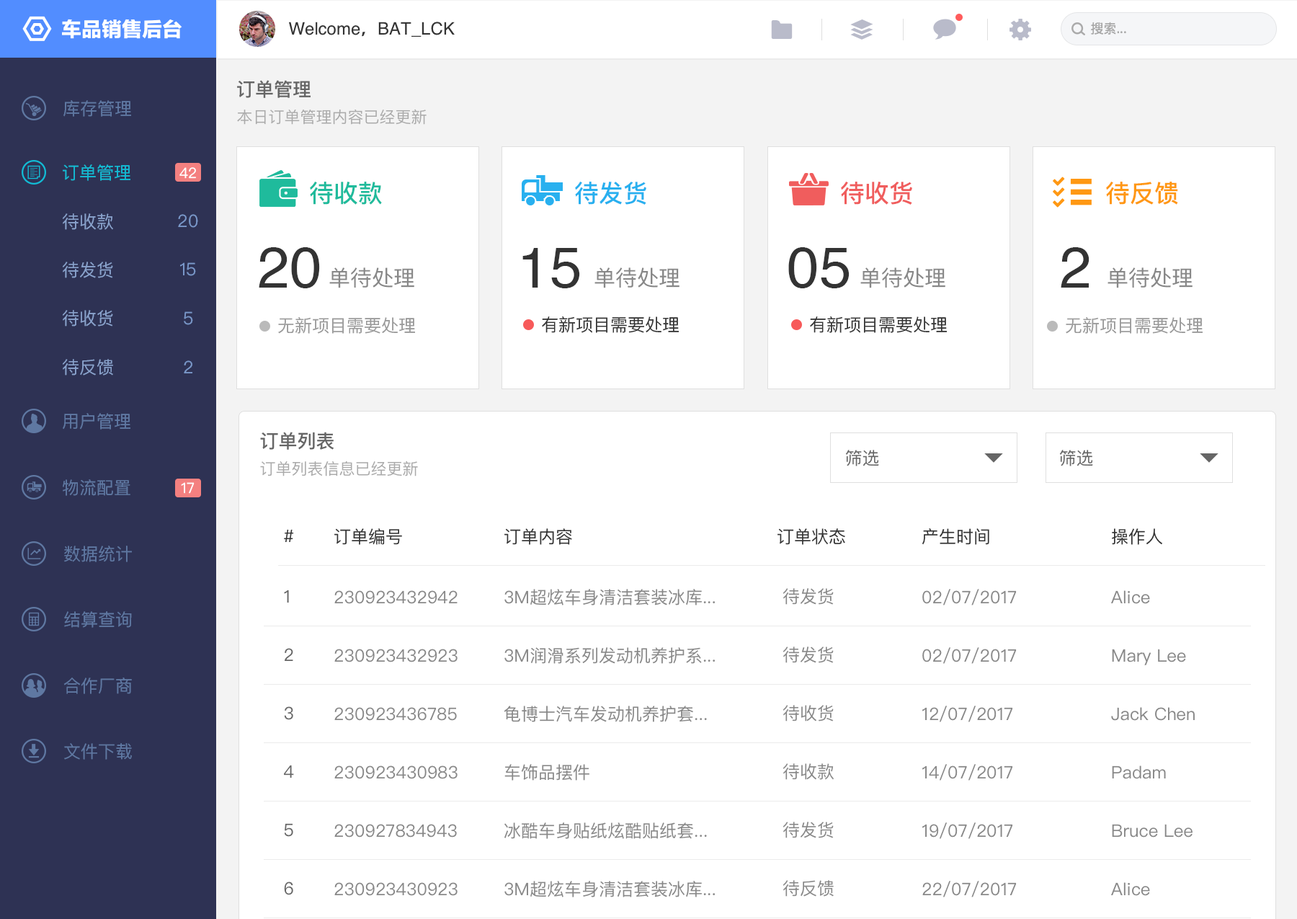
<style>
.page{position:relative;width:1297px;height:919px;background:#ffffff}
.page>*{position:absolute;margin:0}
.t1{font:20.2px "FZLTTHK--GBK1-0";color:#ffffff}
.t2{font:17.3px "Helvetica";color:#333333}
.t3{font:17.3px "AdobeHeitiStd-Regular";color:#333333}
.t4{font:13px "PingFangSC-Regular";color:#aaaaaa}
.t5{font:18.7px "PingFangSC-Medium";color:#666666}
.t6{font:17.3px "PingFangSC-Regular";color:#5f78a2}
.t7{font:15.9px "PingFangSC-Regular";color:#aaaaaa}
.t8{font:17.3px "PingFangSC-Regular";color:#12bcd5}
.t9{font:14.4px "PingFangSC-Regular";color:#ffffff}
.t10{font:24.5px "PingFangSC-Medium";color:#1fbb9c}
.t11{font:24.5px "PingFangSC-Medium";color:#29b0ef}
.t12{font:24.5px "PingFangSC-Medium";color:#f05d5d}
.t13{font:24.5px "PingFangSC-Medium";color:#fe9712}
.t14{font:17.3px "PingFangSC-Regular";color:#8aa3cd}
.t15{font:17.3px "PingFangSC-Regular";color:#7997c9}
.t16{font:57.7px "Helvetica";color:#333333}
.t17{font:21.6px "PingFangSC-Regular";color:#888888}
.t18{font:17.3px "PingFangSC-Regular";color:#999999}
.t19{font:17.3px "PingFangSC-Regular";color:#333333}
.t20{font:17.3px "PingFangSC-Regular";color:#666666}
.t21{font:17.3px "PingFangSC-Regular";color:#888888}
</style>
<div class="page">
<p class="t1" style="left:62px;top:19px;width:120px;height:20px">车品销售后台</p>
<p class="t2" style="left:289px;top:22px;width:166px;height:15px">Welcome<span class="t3">，</span>BAT_LCK</p>
<p class="t4" style="left:1091px;top:22px;width:36px;height:13px">搜索...</p>
<p class="t5" style="left:237px;top:80px;width:74px;height:18px">订单管理</p>
<p class="t6" style="left:63px;top:100px;width:68px;height:17px">库存管理</p>
<p class="t7" style="left:237px;top:109px;width:190px;height:16px">本日订单管理内容已经更新</p>
<p class="t8" style="left:63px;top:164px;width:67px;height:17px">订单管理</p>
<p class="t9" style="left:179px;top:167px;width:17px;height:12px">42</p>
<p class="t10" style="left:310px;top:182px;width:72px;height:23px">待收款</p>
<p class="t11" style="left:575px;top:182px;width:72px;height:23px">待发货</p>
<p class="t12" style="left:841px;top:182px;width:72px;height:23px">待收货</p>
<p class="t13" style="left:1106px;top:182px;width:73px;height:23px">待反馈</p>
<p class="t14" style="left:63px;top:213px;width:50px;height:17px">待收款</p>
<p class="t15" style="left:178px;top:214px;width:20px;height:14px">20</p>
<p class="t16" style="left:259px;top:247px;width:61px;height:41px">20</p>
<p class="t16" style="left:523px;top:248px;width:57px;height:40px">15</p>
<p class="t16" style="left:789px;top:247px;width:61px;height:41px">05</p>
<p class="t16" style="left:1061px;top:247px;width:29px;height:41px">2</p>
<p class="t14" style="left:63px;top:262px;width:50px;height:16px">待发货</p>
<p class="t15" style="left:180px;top:262px;width:16px;height:14px">15</p>
<p class="t17" style="left:329px;top:267px;width:85px;height:21px">单待处理</p>
<p class="t17" style="left:595px;top:267px;width:85px;height:21px">单待处理</p>
<p class="t17" style="left:861px;top:267px;width:85px;height:21px">单待处理</p>
<p class="t17" style="left:1108px;top:267px;width:85px;height:21px">单待处理</p>
<p class="t14" style="left:63px;top:310px;width:50px;height:17px">待收货</p>
<p class="t15" style="left:184px;top:311px;width:9px;height:14px">5</p>
<p class="t18" style="left:278px;top:317px;width:137px;height:17px">无新项目需要处理</p>
<p class="t19" style="left:542px;top:316px;width:137px;height:17px">有新项目需要处理</p>
<p class="t19" style="left:810px;top:316px;width:137px;height:17px">有新项目需要处理</p>
<p class="t18" style="left:1066px;top:317px;width:137px;height:17px">无新项目需要处理</p>
<p class="t14" style="left:63px;top:359px;width:50px;height:17px">待反馈</p>
<p class="t15" style="left:184px;top:360px;width:8px;height:13px">2</p>
<p class="t6" style="left:63px;top:413px;width:67px;height:17px">用户管理</p>
<p class="t5" style="left:260px;top:432px;width:74px;height:18px">订单列表</p>
<p class="t20" style="left:846px;top:450px;width:33px;height:16px">筛选</p>
<p class="t20" style="left:1060px;top:450px;width:33px;height:16px">筛选</p>
<p class="t7" style="left:260px;top:461px;width:158px;height:15px">订单列表信息已经更新</p>
<p class="t6" style="left:63px;top:479px;width:67px;height:17px">物流配置</p>
<p class="t9" style="left:181px;top:482px;width:14px;height:12px">17</p>
<p class="t19" style="left:284px;top:529px;width:10px;height:13px">#</p>
<p class="t19" style="left:334px;top:528px;width:68px;height:17px">订单编号</p>
<p class="t19" style="left:505px;top:528px;width:67px;height:17px">订单内容</p>
<p class="t19" style="left:778px;top:528px;width:68px;height:17px">订单状态</p>
<p class="t19" style="left:923px;top:528px;width:67px;height:17px">产生时间</p>
<p class="t19" style="left:1112px;top:528px;width:51px;height:17px">操作人</p>
<p class="t6" style="left:64px;top:546px;width:68px;height:16px">数据统计</p>
<p class="t20" style="left:284px;top:590px;width:5px;height:13px">1</p>
<p class="t21" style="left:334px;top:590px;width:124px;height:14px">230923432942</p>
<p class="t21" style="left:505px;top:589px;width:211px;height:16px">3M超炫车身清洁套装冰库...</p>
<p class="t21" style="left:784px;top:588px;width:50px;height:17px">待发货</p>
<p class="t21" style="left:923px;top:589px;width:94px;height:16px">02/07/2017</p>
<p class="t21" style="left:1112px;top:590px;width:38px;height:14px">Alice</p>
<p class="t6" style="left:64px;top:611px;width:68px;height:17px">结算查询</p>
<p class="t20" style="left:285px;top:648px;width:8px;height:13px">2</p>
<p class="t21" style="left:334px;top:649px;width:124px;height:13px">230923432923</p>
<p class="t21" style="left:505px;top:647px;width:211px;height:17px">3M润滑系列发动机养护系...</p>
<p class="t21" style="left:784px;top:647px;width:50px;height:16px">待发货</p>
<p class="t21" style="left:923px;top:647px;width:94px;height:17px">02/07/2017</p>
<p class="t21" style="left:1112px;top:649px;width:74px;height:16px">Mary Lee</p>
<p class="t6" style="left:63px;top:678px;width:69px;height:16px">合作厂商</p>
<p class="t20" style="left:284px;top:706px;width:9px;height:14px">3</p>
<p class="t21" style="left:334px;top:707px;width:123px;height:14px">230923436785</p>
<p class="t21" style="left:504px;top:706px;width:203px;height:16px">龟博士汽车发动机养护套...</p>
<p class="t21" style="left:784px;top:705px;width:50px;height:17px">待收货</p>
<p class="t21" style="left:923px;top:706px;width:90px;height:16px">12/07/2017</p>
<p class="t21" style="left:1112px;top:707px;width:83px;height:14px">Jack Chen</p>
<p class="t6" style="left:64px;top:743px;width:68px;height:17px">文件下载</p>
<p class="t20" style="left:284px;top:765px;width:10px;height:13px">4</p>
<p class="t21" style="left:334px;top:766px;width:124px;height:13px">230923430983</p>
<p class="t21" style="left:505px;top:764px;width:85px;height:17px">车饰品摆件</p>
<p class="t21" style="left:784px;top:763px;width:50px;height:17px">待收款</p>
<p class="t21" style="left:923px;top:764px;width:90px;height:17px">14/07/2017</p>
<p class="t21" style="left:1112px;top:766px;width:54px;height:13px">Padam</p>
<p class="t21" style="left:784px;top:822px;width:50px;height:16px">待发货</p>
<p class="t20" style="left:284px;top:823px;width:9px;height:14px">5</p>
<p class="t21" style="left:334px;top:824px;width:123px;height:14px">230927834943</p>
<p class="t21" style="left:505px;top:822px;width:202px;height:17px">冰酷车身贴纸炫酷贴纸套...</p>
<p class="t21" style="left:923px;top:822px;width:90px;height:17px">19/07/2017</p>
<p class="t21" style="left:1112px;top:824px;width:81px;height:14px">Bruce Lee</p>
<p class="t20" style="left:284px;top:882px;width:9px;height:13px">6</p>
<p class="t21" style="left:505px;top:881px;width:211px;height:16px">3M超炫车身清洁套装冰库...</p>
<p class="t21" style="left:784px;top:880px;width:50px;height:17px">待反馈</p>
<p class="t21" style="left:923px;top:881px;width:94px;height:16px">22/07/2017</p>
<p class="t21" style="left:334px;top:882px;width:124px;height:14px">230923430923</p>
<p class="t21" style="left:1112px;top:882px;width:38px;height:14px">Alice</p>
</div>
